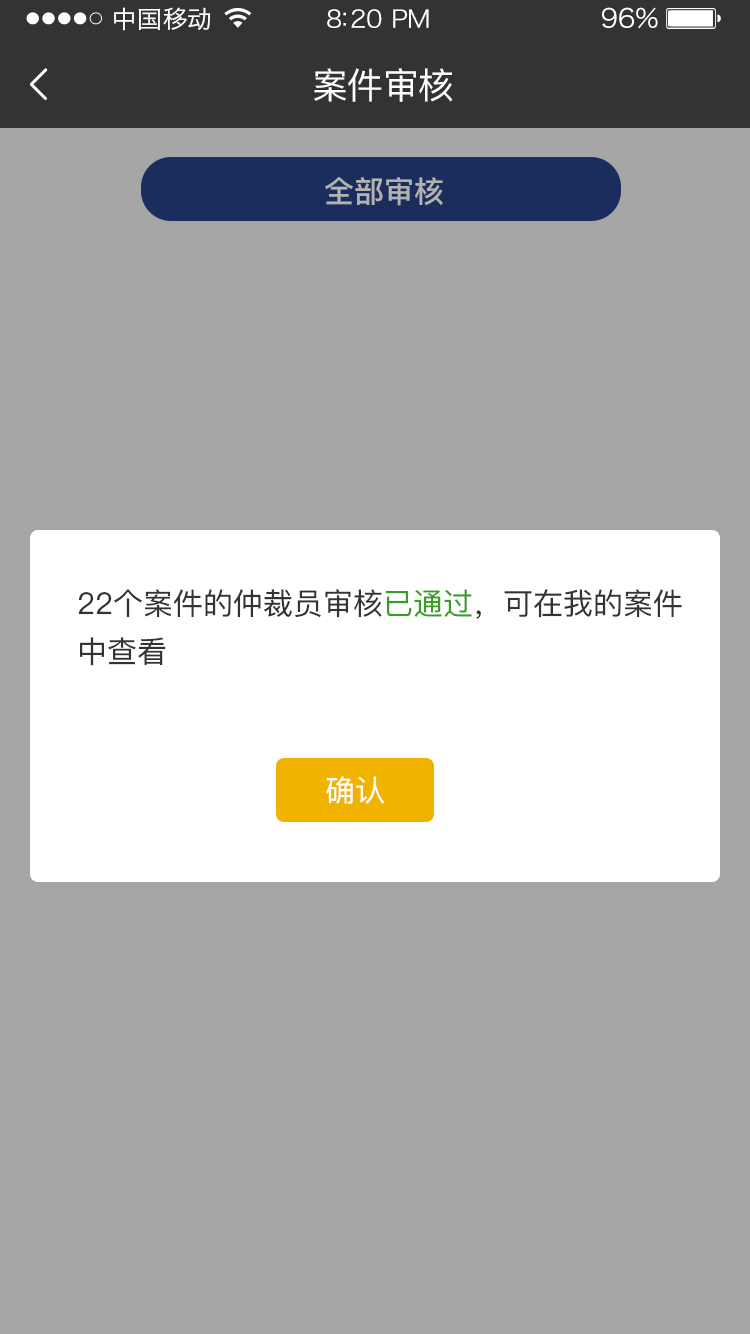
<style>
.page{position:relative;width:750px;height:1334px;background:#a6a6a6}
.page>*{position:absolute;margin:0}
.t1{font:24px "HiraginoSansGB-W3";letter-spacing:0.02em;color:#ffffff;scale:1.03 1}
.t2{font:24px "HiraginoSansGB-W3";letter-spacing:-0.02em;color:#ffffff;scale:1.03 1}
.t3{font:26.2px "HiraginoSansGB-W3";letter-spacing:-0.02em;color:#ffffff;scale:1.03 1}
.t4{font:36px "PingFangSC-Regular";letter-spacing:-0.02em;color:#ffffff}
.t5{font:30px "PingFangSC-Medium";color:#b2b2b2}
.t6{font:30px/48px "PingFangSC-Regular";color:#333333}
.t7{font:30px/48px "PingFangSC-Regular";color:#379e23}
.t8{font:30px "PingFangSC-Regular";color:#ffffff}
</style>
<div class="page">
<p class="t1" style="left:114px;top:7px;width:97px;height:24px">中国移动</p>
<p class="t2" style="left:327px;top:9px;width:102px;height:19px">8:20 PM</p>
<p class="t3" style="left:602px;top:7px;width:56px;height:22px">96%</p>
<p class="t4" style="left:314px;top:68px;width:139px;height:34px">案件审核</p>
<p class="t5" style="left:325px;top:177px;width:118px;height:29px">全部审核</p>
<p class="t6" style="left:78px;top:589px;width:604px;height:77px">22个案件的仲裁员审核<span class="t7">已通过</span>，可在我的案件<br>中查看</p>
<p class="t8" style="left:326px;top:776px;width:58px;height:28px">确认</p>
</div>
